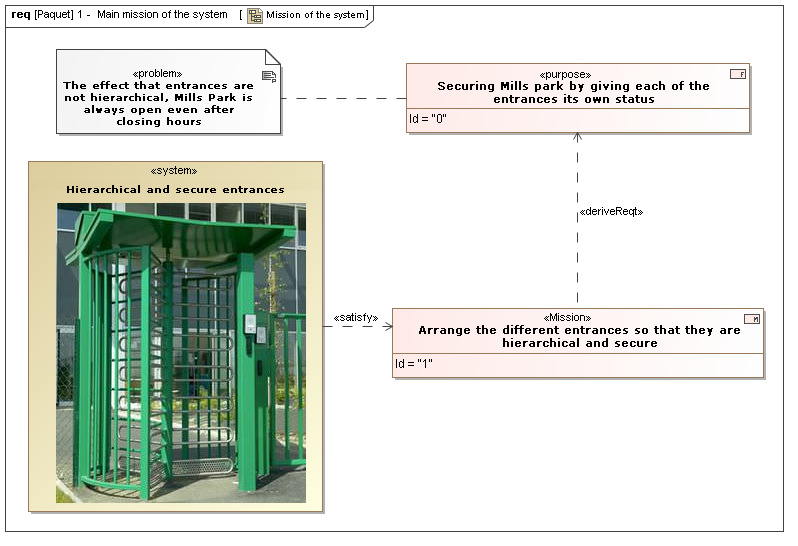
<style>
.page{position:relative;width:798px;height:546px;background:#ffffff}
.page>*{position:absolute;margin:0}
.t1{font:11px "ArialMT";color:#000000}
.t2{font:10px "ArialMT";color:#000000}
.t3{font:10px "Verdana";color:#000000;font-weight:bold}
.t4{font:11px "Verdana";color:#000000;font-weight:bold}
</style>
<div class="page">
<p class="t1" style="left:98px;top:10px;width:129px;height:10px">Main mission of the system</p>
<p class="t2" style="left:267px;top:11px;width:97px;height:9px">Mission of the system</p>
<p class="t1" style="left:540px;top:72px;width:51px;height:8px">«purpose»</p>
<p class="t3" style="left:63px;top:81px;width:190px;height:46px;text-align:center">The effect that entrances are not hierarchical, Mills Park is always open even after <br>closing hours</p>
<p class="t4" style="left:438px;top:81px;width:271px;height:22px;text-align:center">Securing Mills park by giving each of the <br>entrances its own status</p>
<p class="t3" style="left:67px;top:185px;width:217px;height:8px">Hierarchical and secure entrances</p>
<p class="t4" style="left:419px;top:325px;width:321px;height:22px;text-align:center">Arrange the different entrances so that they are hierarchical and secure</p>
</div>
